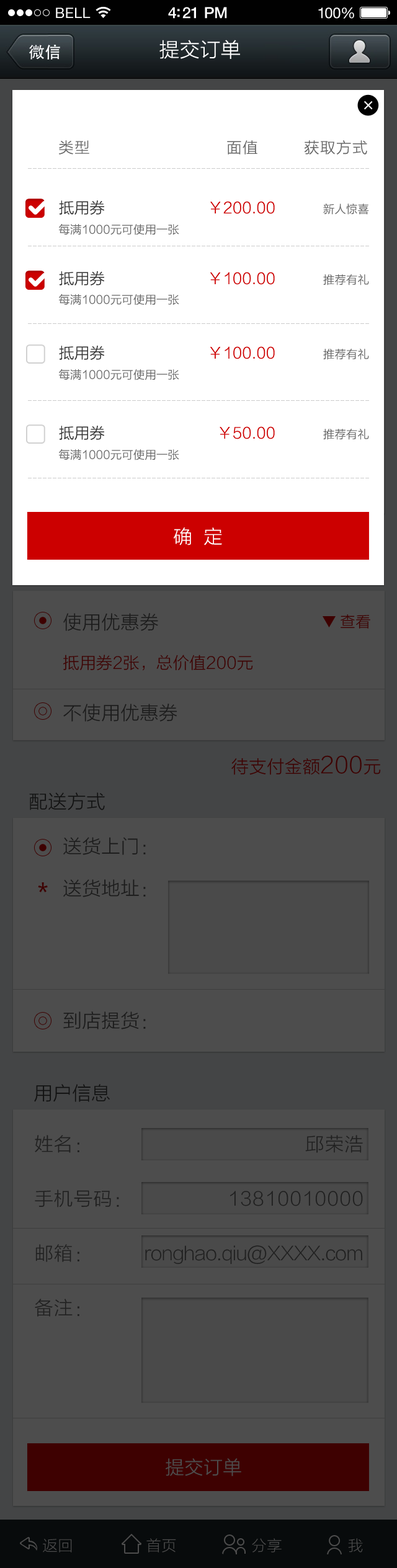
<style>
.page{position:relative;width:397px;height:1568px;background:#4d4d4d}
.page>*{position:absolute;margin:0}
.t1{font:14.3px "HelveticaNeue";letter-spacing:0.02em;color:#ffffff}
.t2{font:15.5px "HelveticaNeue-Medium";letter-spacing:-0.02em;color:#ffffff}
.t3{font:14.9px "HelveticaNeue";letter-spacing:-0.02em;color:#ffffff}
.t4{font:19.9px "STHeitiSC-Medium";color:#ffffff}
.t5{font:14.9px "STHeitiSC-Medium";letter-spacing:0.05em;color:#666666}
.t6{font:11.2px "MicrosoftYaHei";color:#cccccc}
.t7{font:14.9px "STHeitiSC-Medium";color:#333333}
.t8{font:14.9px "STHeitiSC-Medium";color:#cc0000}
.t9{font:11.2px "STHeitiSC-Medium";color:#666666}
.t10{font:18.6px "STHeitiSC-Medium";color:#ffffff}
.t11{font:16.1px/18.6px "STHeitiSC-Medium"}
.t12{font:18.6px/21.1px "STHeitiSC-Medium"}
.t13{font:18.6px/26.1px "STHeitiSC-Medium"}
.t14{font:14.9px "STHeitiSC-Medium";color:#3e0101}
.t15{font:17.4px/24.8px "STHeitiSC-Medium";color:#3e0101}
.t16{font:22.3px/24.8px "STHeitiSC-Medium";color:#3e0101}
.t17{font:18.6px "STHeitiSC-Medium";color:#101010}
.t18{font:18.6px/21.1px "STHeitiSC-Medium";color:#1a1a1a}
.t19{font:24.8px "MicrosoftYaHei";color:#3e0101}
.t20{font:18.6px "STHeitiSC-Medium";color:#1a1a1a}
.t21{font:18.6px/27.3px "STHeitiSC-Medium";letter-spacing:0.025em;color:#1f1f1f}
.t22{font:18.6px/27.3px "STHeitiSC-Medium";letter-spacing:-0.05em;color:#1f1f1f}
.t23{font:18.6px "STHeitiSC-Medium";color:#4d4d4d}
.t24{font:14.9px "STHeitiSC-Medium";color:#4d4d4d}
</style>
<div class="page">
<p class="t1" style="left:56px;top:7px;width:35px;height:11px">BELL</p>
<p class="t2" style="left:168px;top:7px;width:59px;height:12px">4:21 PM</p>
<p class="t3" style="left:318px;top:7px;width:36px;height:12px">100%</p>
<p class="t4" style="left:159px;top:40px;width:81px;height:19px">提交订单</p>
<p class="t4" style="left:364px;top:101px;width:9px;height:9px;rotate:45deg">+</p>
<p class="t5" style="left:59px;top:140px;width:30px;height:15px">类型</p>
<p class="t5" style="left:227px;top:140px;width:31px;height:15px">面值</p>
<p class="t5" style="left:304px;top:140px;width:63px;height:15px">获取方式</p>
<p class="t6" style="left:28px;top:168px;width:341px;height:1px">---------------------------------------------------------------------</p>
<p class="t7" style="left:59px;top:200px;width:45px;height:15px">抵用券</p>
<p class="t8" style="left:210px;top:201px;width:65px;height:13px">￥200.00</p>
<p class="t9" style="left:323px;top:204px;width:46px;height:11px">新人惊喜</p>
<p class="t9" style="left:59px;top:224px;width:120px;height:11px">每满1000元可使用一张</p>
<p class="t6" style="left:28px;top:246px;width:341px;height:0px">---------------------------------------------------------------------</p>
<p class="t7" style="left:59px;top:271px;width:45px;height:14px">抵用券</p>
<p class="t8" style="left:210px;top:272px;width:65px;height:13px">￥100.00</p>
<p class="t9" style="left:323px;top:274px;width:46px;height:11px">推荐有礼</p>
<p class="t9" style="left:59px;top:294px;width:120px;height:11px">每满1000元可使用一张</p>
<p class="t6" style="left:28px;top:323px;width:341px;height:1px">---------------------------------------------------------------------</p>
<p class="t7" style="left:59px;top:346px;width:45px;height:14px">抵用券</p>
<p class="t8" style="left:210px;top:346px;width:65px;height:13px">￥100.00</p>
<p class="t9" style="left:323px;top:349px;width:46px;height:11px">推荐有礼</p>
<p class="t9" style="left:59px;top:369px;width:120px;height:11px">每满1000元可使用一张</p>
<p class="t6" style="left:28px;top:400px;width:341px;height:1px">---------------------------------------------------------------------</p>
<p class="t7" style="left:59px;top:426px;width:45px;height:14px">抵用券</p>
<p class="t8" style="left:220px;top:426px;width:55px;height:13px">￥50.00</p>
<p class="t9" style="left:323px;top:429px;width:46px;height:11px">推荐有礼</p>
<p class="t9" style="left:59px;top:449px;width:120px;height:11px">每满1000元可使用一张</p>
<p class="t6" style="left:28px;top:478px;width:341px;height:0px">---------------------------------------------------------------------</p>
<p class="t10" style="left:174px;top:527px;width:48px;height:18px">确  定</p>
<p class="t11" style="left:63px;top:613px;width:190px;height:109px;text-align:justify"><span class="t12">使用优惠券<br><br></span>抵用券2张，总价值200元<br><br><span class="t13">不使用优惠券</span></p>
<p class="t14" style="left:341px;top:614px;width:29px;height:15px">查看</p>
<p class="t15" style="left:231px;top:755px;width:150px;height:20px">待支付金额<span class="t16">200</span>元<br>快速加入会员，获取本次积分。</p>
<p class="t17" style="left:29px;top:792px;width:76px;height:18px">配送方式</p>
<p class="t18" style="left:63px;top:837px;width:83px;height:60px;text-align:justify">送货上门：                                  <br><br>送货地址：</p>
<p class="t19" style="left:38px;top:882px;width:10px;height:10px">*</p>
<p class="t20" style="left:63px;top:1011px;width:83px;height:18px">到店提货：</p>
<p class="t17" style="left:34px;top:1084px;width:76px;height:18px">用户信息</p>
<p class="t21" style="left:35px;top:1135px;width:84px;height:182px">姓名：<br><br>手机号码：<br><br>邮箱：<br><br>备注：</p>
<p class="t22" style="left:145px;top:1135px;width:218px;height:130px;text-align:right"><span class="t21">邱荣浩<br><br>13810010000<br><br></span>ronghao.qiu@XXXX.com</p>
<p class="t23" style="left:166px;top:1458px;width:75px;height:18px">提交订单</p>
<p class="t24" style="left:43px;top:1539px;width:29px;height:13px">返回</p>
<p class="t24" style="left:146px;top:1538px;width:30px;height:14px">首页</p>
<p class="t24" style="left:252px;top:1538px;width:30px;height:14px">分享</p>
<p class="t24" style="left:348px;top:1538px;width:15px;height:14px">我</p>
</div>
